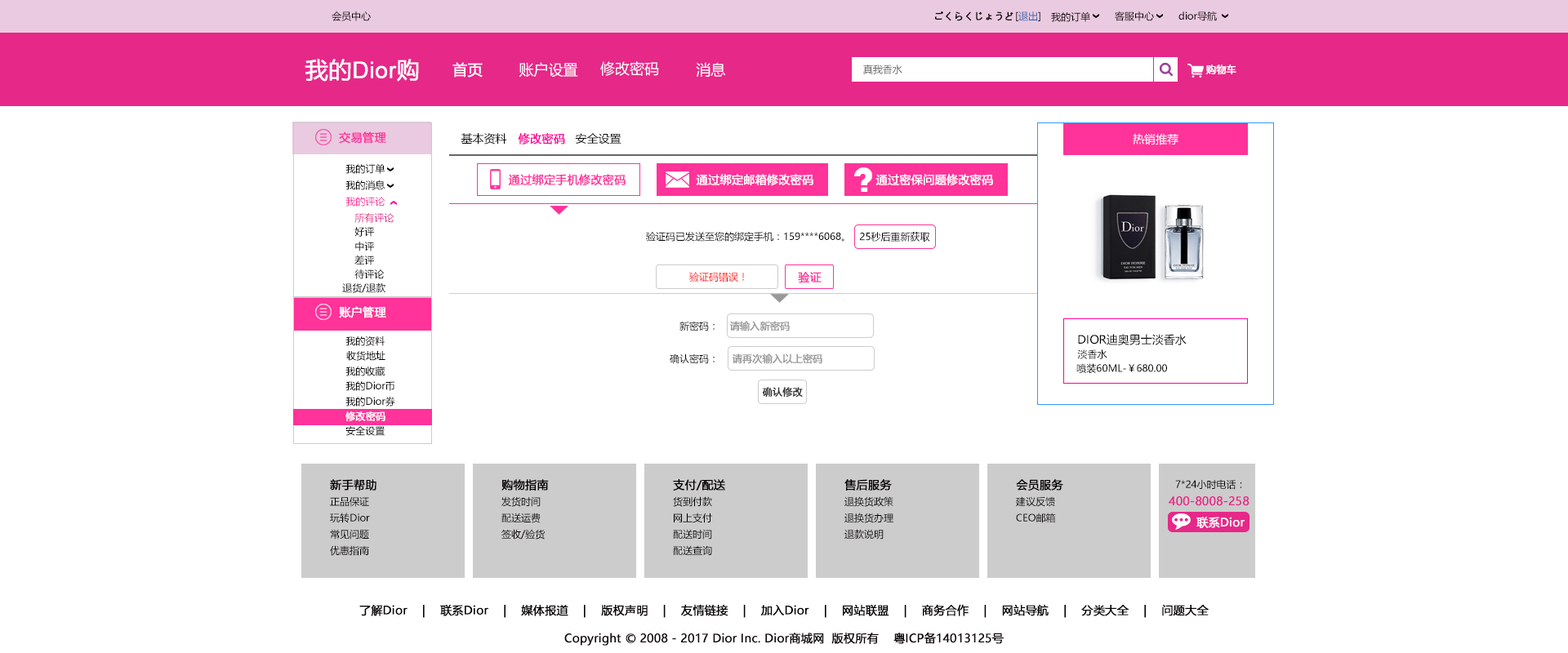
<style>
.page{position:relative;width:1568px;height:653px;background:#ffffff}
.page>*{position:absolute;margin:0}
.t1{font:9.8px "MicrosoftYaHei";color:#040000}
.t2{font:9.8px "MicrosoftYaHei";color:#040000;font-weight:bold}
.t3{font:9.8px "MicrosoftYaHei";color:#2a62ae}
.t4{font:22.9px "ArialMT";color:#ffffff;font-weight:bold}
.t5{font:22.9px "MicrosoftYaHei";color:#ffffff;font-weight:bold}
.t6{font:14.7px "MicrosoftYaHei";color:#ffffff;font-weight:bold}
.t7{font:14.7px "MicrosoftYaHei";color:#ffffff}
.t8{font:9.8px "MicrosoftYaHei";color:#666666}
.t9{font:9.8px "MicrosoftYaHei";color:#ffffff;font-weight:bold}
.t10{font:11.4px "MicrosoftYaHei";color:#ff3399;font-weight:bold}
.t11{font:11.4px "MicrosoftYaHei";color:#000000}
.t12{font:11.4px "MicrosoftYaHei";color:#ff0099;font-weight:bold}
.t13{font:11.4px "MicrosoftYaHei";color:#ffffff}
.t14{font:9.8px "MicrosoftYaHei";color:#000000}
.t15{font:11.4px "MicrosoftYaHei";color:#ffffff;font-weight:bold}
.t16{font:9.8px "MicrosoftYaHei";color:#ff3399}
.t17{font:9.8px "MicrosoftYaHei";color:#e62889}
.t18{font:9.8px "MicrosoftYaHei";color:#ff0000}
.t19{font:9.8px "MicrosoftYaHei";color:#999999;font-weight:bold}
.t20{font:9.8px "MicrosoftYaHei";color:#333333;font-weight:bold}
.t21{font:11.4px "MicrosoftYaHei";color:#040000;font-weight:bold}
.t22{font:11.4px "MicrosoftYaHei";color:#e62889;font-weight:bold}
.t23{font:11.4px "MicrosoftYaHei";color:#000000;font-weight:bold}
</style>
<div class="page">
<p class="t1" style="left:332px;top:11px;width:39px;height:10px">会员中心</p>
<p class="t2" style="left:935px;top:11px;width:78px;height:10px">ごくらくじょうど</p>
<p class="t3" style="left:1016px;top:11px;width:24px;height:10px"><span class="t1">[</span>退出<span class="t1">]</span></p>
<p class="t1" style="left:1051px;top:11px;width:39px;height:11px">我的订单</p>
<p class="t1" style="left:1115px;top:11px;width:39px;height:10px">客服中心</p>
<p class="t1" style="left:1178px;top:11px;width:39px;height:10px">dior导航</p>
<p class="t4" style="left:305px;top:59px;width:114px;height:23px"><span class="t5">我的</span>Dior<span class="t5">购</span></p>
<p class="t6" style="left:452px;top:62px;width:31px;height:16px">首页</p>
<p class="t7" style="left:519px;top:62px;width:59px;height:16px">账户设置</p>
<p class="t7" style="left:600px;top:61px;width:59px;height:15px">修改密码</p>
<p class="t7" style="left:696px;top:62px;width:30px;height:15px">消息</p>
<p class="t8" style="left:863px;top:65px;width:39px;height:9px">真我香水</p>
<p class="t9" style="left:1205px;top:65px;width:31px;height:10px">购物车</p>
<p class="t10" style="left:339px;top:131px;width:47px;height:13px">交易管理</p>
<p class="t11" style="left:461px;top:133px;width:46px;height:12px">基本资料</p>
<p class="t12" style="left:518px;top:133px;width:47px;height:12px">修改密码</p>
<p class="t11" style="left:575px;top:133px;width:46px;height:12px">安全设置</p>
<p class="t13" style="left:1133px;top:133px;width:45px;height:12px">热销推荐</p>
<p class="t14" style="left:345px;top:163px;width:40px;height:11px">我的订单</p>
<p class="t10" style="left:508px;top:174px;width:118px;height:12px">通过绑定手机修改密码</p>
<p class="t15" style="left:696px;top:174px;width:117px;height:12px">通过绑定邮箱修改密码</p>
<p class="t15" style="left:875px;top:174px;width:118px;height:12px">通过密保问题修改密码</p>
<p class="t14" style="left:345px;top:180px;width:40px;height:10px">我的消息</p>
<p class="t16" style="left:345px;top:197px;width:40px;height:10px">我的评论</p>
<p class="t17" style="left:354px;top:213px;width:40px;height:10px">所有评论</p>
<p class="t1" style="left:354px;top:227px;width:20px;height:10px">好评</p>
<p class="t14" style="left:646px;top:232px;width:198px;height:10px">验证码已发送至您的绑定手机：159****6068。</p>
<p class="t14" style="left:860px;top:232px;width:70px;height:10px">25秒后重新获取</p>
<p class="t1" style="left:355px;top:242px;width:19px;height:10px">中评</p>
<p class="t1" style="left:354px;top:255px;width:20px;height:10px">差评</p>
<p class="t1" style="left:354px;top:270px;width:31px;height:9px">待评论</p>
<p class="t18" style="left:689px;top:272px;width:55px;height:11px">验证码错误！</p>
<p class="t10" style="left:798px;top:272px;width:24px;height:11px">验证</p>
<p class="t14" style="left:342px;top:283px;width:43px;height:10px">退货/退款</p>
<p class="t15" style="left:339px;top:306px;width:47px;height:12px">账户管理</p>
<p class="t14" style="left:679px;top:321px;width:36px;height:11px">新密码：</p>
<p class="t19" style="left:729px;top:321px;width:61px;height:11px">请输入新密码</p>
<p class="t1" style="left:345px;top:336px;width:40px;height:10px">我的资料</p>
<p class="t11" style="left:1078px;top:334px;width:109px;height:11px">DIOR迪奥男士淡香水</p>
<p class="t1" style="left:346px;top:351px;width:39px;height:10px">收货地址</p>
<p class="t14" style="left:670px;top:354px;width:45px;height:10px">确认密码：</p>
<p class="t19" style="left:732px;top:354px;width:90px;height:10px">请再次输入以上密码</p>
<p class="t14" style="left:1077px;top:350px;width:30px;height:9px">淡香水</p>
<p class="t14" style="left:1076px;top:363px;width:91px;height:11px">喷装60ML-￥680.00</p>
<p class="t1" style="left:345px;top:367px;width:40px;height:9px">我的收藏</p>
<p class="t14" style="left:345px;top:381px;width:49px;height:10px">我的Dior币</p>
<p class="t20" style="left:762px;top:387px;width:41px;height:11px">确认修改</p>
<p class="t14" style="left:345px;top:397px;width:50px;height:10px">我的Dior券</p>
<p class="t9" style="left:345px;top:412px;width:40px;height:9px">修改密码</p>
<p class="t14" style="left:345px;top:426px;width:40px;height:10px">安全设置</p>
<p class="t21" style="left:330px;top:479px;width:46px;height:12px">新手帮助</p>
<p class="t21" style="left:501px;top:479px;width:48px;height:12px">购物指南</p>
<p class="t21" style="left:673px;top:479px;width:52px;height:12px">支付/配送</p>
<p class="t21" style="left:844px;top:479px;width:48px;height:12px">售后服务</p>
<p class="t21" style="left:1016px;top:479px;width:47px;height:12px">会员服务</p>
<p class="t1" style="left:1175px;top:479px;width:67px;height:11px">7*24小时电话：</p>
<p class="t1" style="left:330px;top:497px;width:39px;height:10px">正品保证</p>
<p class="t1" style="left:501px;top:497px;width:40px;height:10px">发货时间</p>
<p class="t1" style="left:673px;top:497px;width:39px;height:10px">货到付款</p>
<p class="t1" style="left:844px;top:497px;width:49px;height:10px">退换货政策</p>
<p class="t1" style="left:1016px;top:497px;width:39px;height:10px">建议反馈</p>
<p class="t22" style="left:1169px;top:497px;width:81px;height:9px">400-8008-258</p>
<p class="t1" style="left:330px;top:513px;width:40px;height:10px">玩转Dior</p>
<p class="t1" style="left:501px;top:513px;width:40px;height:10px">配送运费</p>
<p class="t1" style="left:674px;top:513px;width:38px;height:10px">网上支付</p>
<p class="t1" style="left:844px;top:513px;width:49px;height:10px">退换货办理</p>
<p class="t1" style="left:1016px;top:513px;width:40px;height:10px">CEO邮箱</p>
<p class="t15" style="left:1196px;top:517px;width:49px;height:11px">联系Dior</p>
<p class="t1" style="left:330px;top:529px;width:39px;height:11px">常见问题</p>
<p class="t1" style="left:501px;top:529px;width:44px;height:11px">签收/验货</p>
<p class="t1" style="left:673px;top:529px;width:39px;height:11px">配送时间</p>
<p class="t1" style="left:844px;top:529px;width:40px;height:11px">退款说明</p>
<p class="t1" style="left:330px;top:546px;width:39px;height:10px">优惠指南</p>
<p class="t1" style="left:673px;top:546px;width:39px;height:9px">配送查询</p>
<p class="t21" style="left:359px;top:604px;width:850px;height:14px">了解Dior    |    联系Dior    |    媒体报道    |    版权声明    |    友情链接    |    加入Dior    |    网站联盟    |    商务合作    |    网站导航    |    分类大全    |    问题大全</p>
<p class="t23" style="left:564px;top:632px;width:440px;height:14px">Copyright © 2008 - 2017 Dior Inc. Dior商城网  版权所有    粤ICP备14013125号</p>
</div>
